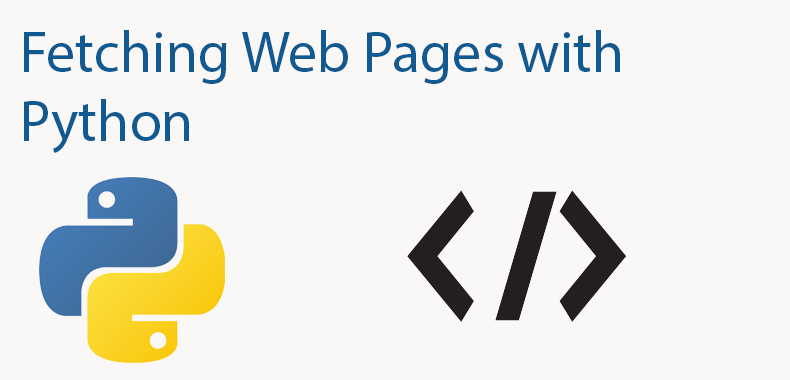
<style>
.page{position:relative;width:790px;height:380px;background:#faf8f7}
.page>*{position:absolute;margin:0}
.t1{font:58.1px "MyriadPro-Regular";color:#115a91}
</style>
<div class="page">
<p class="t1" style="left:24px;top:30px;width:596px;height:123px">Fetching Web Pages with<br>Python</p>
</div>
